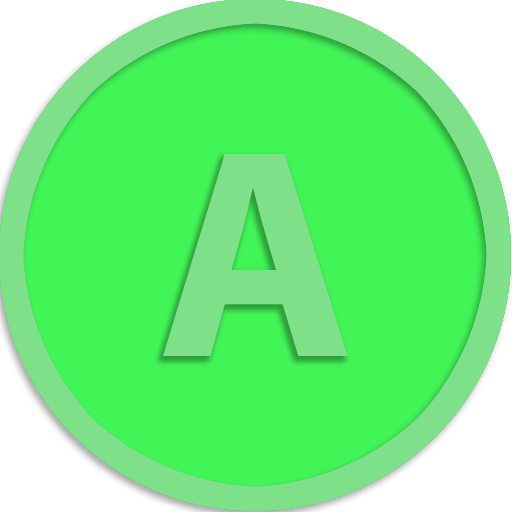
<style>
.page{position:relative;width:512px;height:512px;background:#42f557}
.page>*{position:absolute;margin:0}
.t1{font:300px "MyriadPro-Bold";color:#7ee089}
</style>
<div class="page">
<p class="t1" style="left:163px;top:154px;width:185px;height:202px">A</p>
</div>
